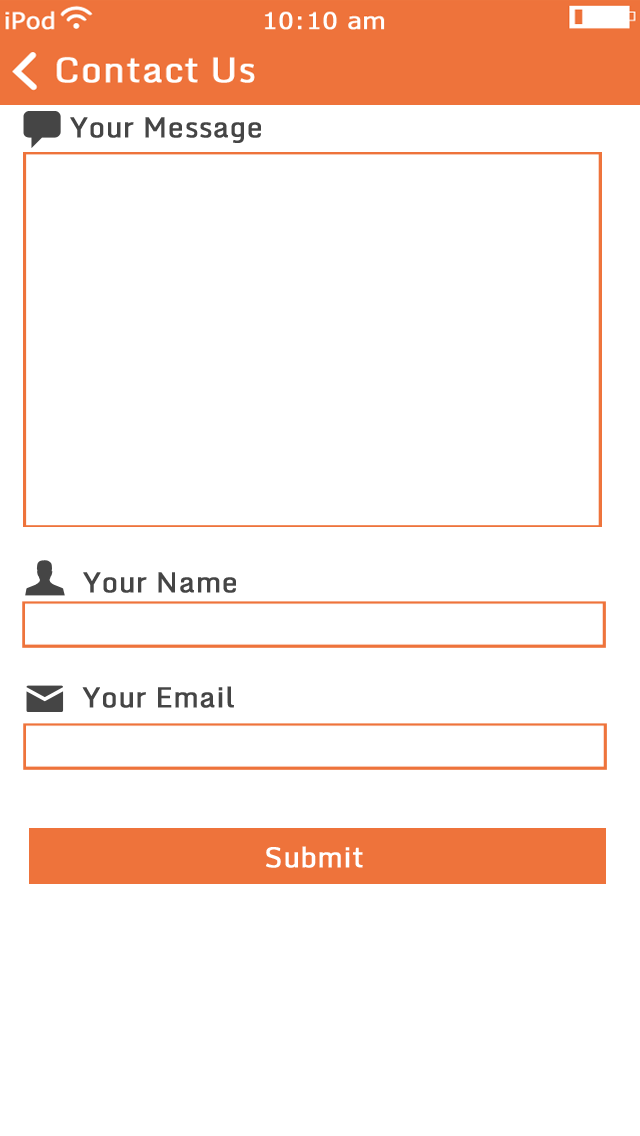
<style>
.page{position:relative;width:640px;height:1136px;background:#ffffff}
.page>*{position:absolute;margin:0}
.t1{font:28px "Monda-Regular";color:#454545;font-weight:bold}
.t2{font:28px "Monda-Regular";color:#ffffff;font-weight:bold}
</style>
<div class="page">
<p class="t1" style="left:70px;top:117px;width:191px;height:26px">Your Message</p>
<p class="t1" style="left:83px;top:572px;width:153px;height:21px">Your Name</p>
<p class="t1" style="left:82px;top:686px;width:152px;height:22px">Your Email</p>
<p class="t2" style="left:266px;top:846px;width:97px;height:22px">Submit</p>
</div>
